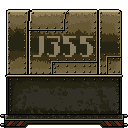
<style>
.page{position:relative;width:128px;height:128px}
.page>*{position:absolute;margin:0}
.t1{font:15px "Pixel-Noir-Regular";letter-spacing:0.08em;color:#9f8f70}
</style>
<div class="page">
<p class="t1" style="left:33px;top:36px;width:60px;height:21px">J355</p>
</div>
